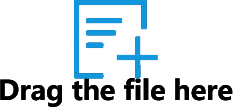
<style>
.page{position:relative;width:237px;height:107px;background:#ffffff}
.page>*{position:absolute;margin:0}
.t1{font:26.7px "MicrosoftYaHei-Bold";color:#000000}
</style>
<div class="page">
<p class="t1" style="left:0px;top:78px;width:233px;height:29px">Drag the file here</p>
</div>
